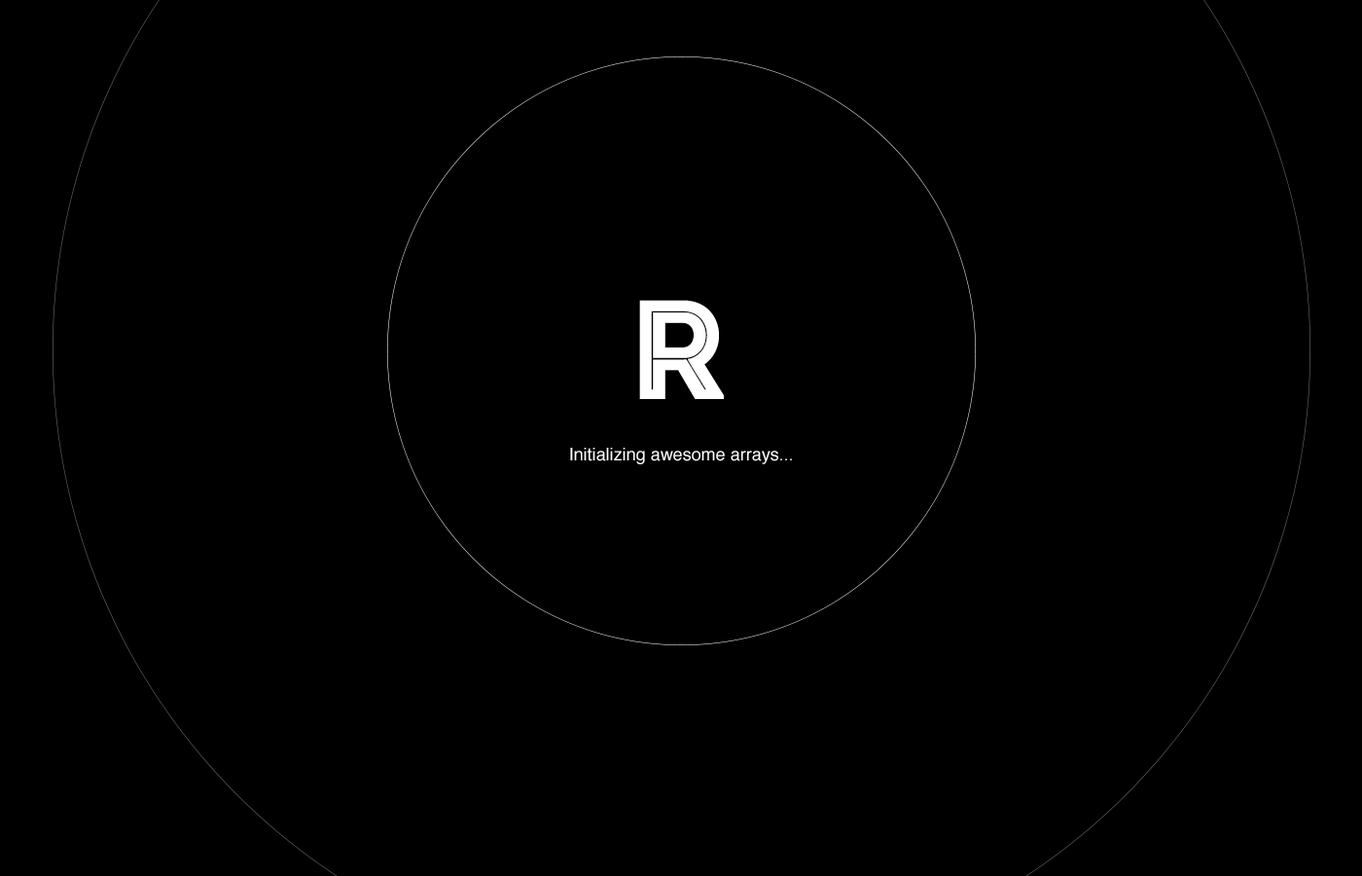
<style>
.page{position:relative;width:1362px;height:876px;background:#000000}
.page>*{position:absolute;margin:0}
.t1{font:140.7px "Intro-Inline";color:#ffffff}
.t2{font:17.5px "Helvetica";color:#ffffff}
</style>
<div class="page">
<p class="t1" style="left:639px;top:300px;width:85px;height:99px">R</p>
<p class="t2" style="left:570px;top:447px;width:222px;height:17px">Initializing awesome arrays...</p>
</div>
